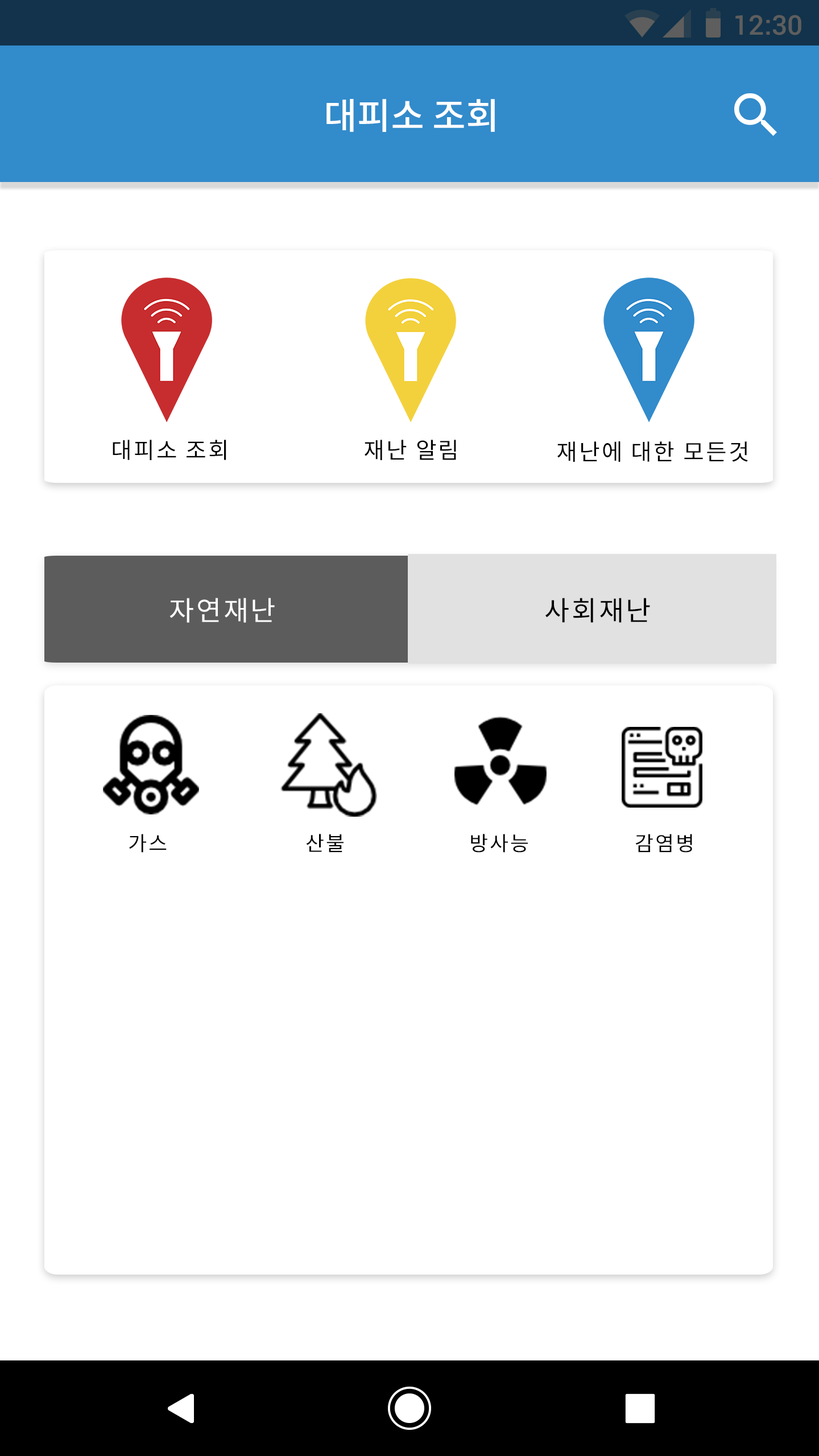
<style>
.page{position:relative;width:819px;height:1456px;background:#ffffff}
.page>*{position:absolute;margin:0}
.t1{font:27.3px "Roboto-Medium";color:#5e5e5e}
.t2{font:36.4px "NotoSansCJKkr-Medium";color:#ffffff}
.t3{font:22.7px "NotoSansCJKkr-Regular";letter-spacing:0.075em;color:#000000}
.t4{font:27.3px "NotoSansCJKkr-Regular";letter-spacing:0.075em;color:#ffffff}
.t5{font:27.3px "NotoSansCJKkr-Regular";letter-spacing:0.075em;color:#000000}
.t6{font:20.5px "NotoSansCJKkr-Regular";letter-spacing:0.075em;color:#000000}
</style>
<div class="page">
<p class="t1" style="left:735px;top:15px;width:66px;height:20px">12:30</p>
<p class="t2" style="left:326px;top:99px;width:169px;height:33px">대피소 조회</p>
<p class="t3" style="left:113px;top:440px;width:113px;height:20px">대피소 조회</p>
<p class="t3" style="left:365px;top:440px;width:91px;height:20px">재난 알림</p>
<p class="t3" style="left:557px;top:441px;width:191px;height:21px">재난에 대한 모든것</p>
<p class="t4" style="left:169px;top:598px;width:106px;height:25px">자연재난</p>
<p class="t5" style="left:545px;top:598px;width:105px;height:25px">사회재난</p>
<p class="t6" style="left:129px;top:834px;width:38px;height:19px">가스</p>
<p class="t6" style="left:306px;top:834px;width:38px;height:19px">산불</p>
<p class="t6" style="left:471px;top:834px;width:57px;height:19px">방사능</p>
<p class="t6" style="left:635px;top:834px;width:57px;height:19px">감염병</p>
</div>
